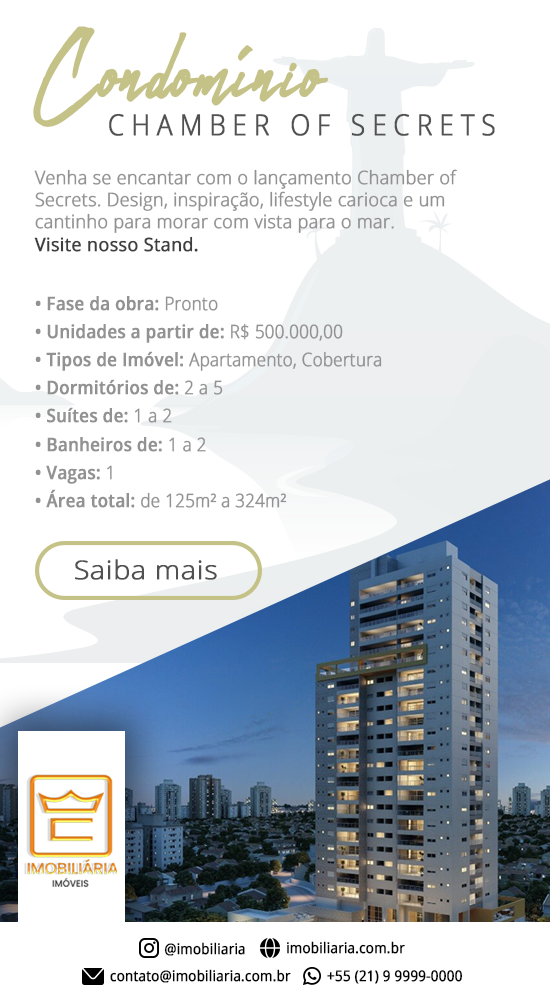
<style>
.page{position:relative;width:550px;height:1000px;background:#ffffff}
.page>*{position:absolute;margin:0}
.t1{font:123.5px "Abuget";color:#c5c287;font-weight:bold;scale:0.9 1}
.t2{font:29px "OpenSans-Light";letter-spacing:0.24em;color:#515151;text-transform:uppercase;font-weight:bold;scale:0.9 1}
.t3{font:18.6px "OpenSans-Light";color:#939292;font-weight:bold;scale:0.96 1}
.t4{font:18.6px "OpenSans";color:#3e3e3e;font-weight:bold;scale:0.96 1}
.t5{font:18.6px/14.1px "OpenSans-Semibold";color:#939292;font-weight:bold;scale:0.9 1}
.t6{font:18.6px/14.1px "OpenSans-Light";color:#939292;font-weight:bold;scale:0.9 1}
.t7{font:26px "OpenSans-Light";color:#515151;font-weight:bold;scale:1.1 1}
.t8{font:14.7px "OpenSans";color:#000000;font-weight:bold;scale:0.9 1}
</style>
<div class="page">
<p class="t1" style="left:33px;top:26px;width:296px;height:101px">Condomínio</p>
<p class="t2" style="left:109px;top:113px;width:386px;height:23px">Chamber of Secrets</p>
<p class="t3" style="left:34px;top:169px;width:423px;height:83px">Venha se encantar com o lançamento Chamber of Secrets. Design, inspiração, lifestyle carioca e um cantinho para morar com vista para o mar.<br><span class="t4">Visite nosso Stand.</span></p>
<p class="t5" style="left:35px;top:296px;width:347px;height:212px">• Fase da obra: <span class="t6">Pronto<br><br></span>• Unidades a partir de:<span class="t6"> R$ 500.000,00<br><br></span>• Tipos de Imóvel:<span class="t6"> Apartamento, Cobertura<br><br></span>• Dormitórios de: <span class="t6">2 a 5<br><br></span>• Suítes de: <span class="t6">1 a 2<br><br></span>• Banheiros de:<span class="t6"> 1 a 2<br><br></span>• Vagas: <span class="t6">1<br><br></span>• Área total:<span class="t6"> de 125m² a 324m²</span></p>
<p class="t7" style="left:75px;top:559px;width:142px;height:21px">Saiba mais</p>
<p class="t8" style="left:164px;top:942px;width:81px;height:14px">@imobiliaria</p>
<p class="t8" style="left:287px;top:941px;width:118px;height:13px">imobiliaria.com.br</p>
<p class="t8" style="left:110px;top:969px;width:181px;height:14px">contato@imobiliaria.com.br</p>
<p class="t8" style="left:327px;top:970px;width:136px;height:14px">+55 (21) 9 9999-0000</p>
</div>
